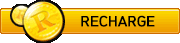
<style>
.page{position:relative;width:180px;height:43px;background:#ffffff}
.page>*{position:absolute;margin:0}
.t1{font:14.3px "HCRDotum-Bold";color:#000000}
</style>
<div class="page">
<p class="t1" style="left:81px;top:15px;width:74px;height:12px">RECHARGE</p>
</div>
